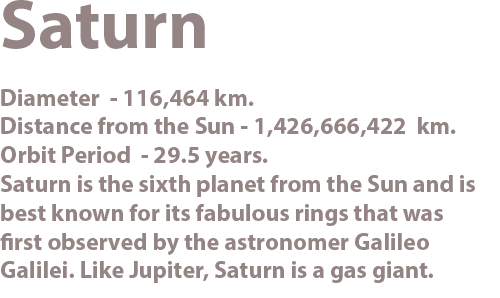
<style>
.page{position:relative;width:500px;height:298px;background:#ffffff}
.page>*{position:absolute;margin:0}
.t1{font:24px "MyriadHebrew-Bold";color:#887777}
.t2{font:70px "MyriadHebrew-Bold";color:#887777}
</style>
<div class="page">
<p class="t1" style="left:0px;top:0px;width:475px;height:283px;text-align:right;opacity:0.9"><span class="t2">Saturn<br></span><br>Diameter  - 116,464 km.<br>Distance from the Sun - 1,426,666,422  km.<br>Orbit Period  - 29.5 years.<br>Saturn is the sixth planet from the Sun and is<br>best known for its fabulous rings that was<br>first observed by the astronomer Galileo<br>Galilei. Like Jupiter, Saturn is a gas giant.</p>
</div>
